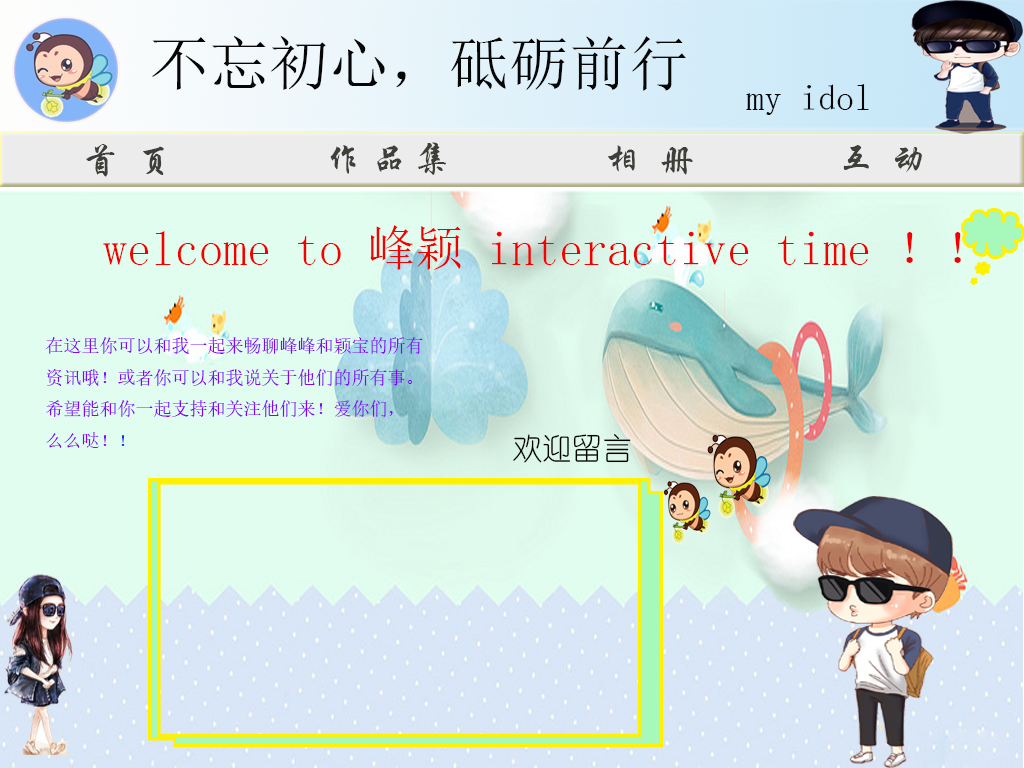
<style>
.page{position:relative;width:1024px;height:768px;background:#e1fdef}
.page>*{position:absolute;margin:0}
.t1{font:60px "SimSun";color:#060606}
.t2{font:36px "SimSun";color:#060606}
.t3{font:36px "STXingkai";color:#3f3f3a}
.t4{font:48px "SimSun";color:#f50000}
.t5{font:18px "SimSun";color:#8405fa}
.t6{font:18px "SimSun";color:#152ff0}
.t7{font:30px "YouYuan";color:#000000}
</style>
<div class="page">
<p class="t1" style="left:152px;top:36px;width:534px;height:55px">不忘初心，砥砺前行</p>
<p class="t2" style="left:746px;top:84px;width:123px;height:31px">my idol</p>
<p class="t3" style="left:86px;top:144px;width:78px;height:33px">首  页</p>
<p class="t3" style="left:330px;top:142px;width:116px;height:33px">作 品 集</p>
<p class="t3" style="left:608px;top:145px;width:85px;height:30px">相  册</p>
<p class="t3" style="left:843px;top:145px;width:79px;height:28px">互  动</p>
<p class="t4" style="left:103px;top:225px;width:858px;height:45px">welcome to 峰颖 interactive time ！！</p>
<p class="t5" style="left:46px;top:337px;width:377px;height:111px">在这里你可以和我一起来畅聊峰峰和颖宝的所有<br>资讯哦！或者你可以和我说关于他们的所有事。<br>希望能和你一起支持和关注他们来！爱你们，<br>么么哒！<span class="t6">！</span></p>
<p class="t7" style="left:513px;top:434px;width:118px;height:29px">欢迎留言</p>
</div>
